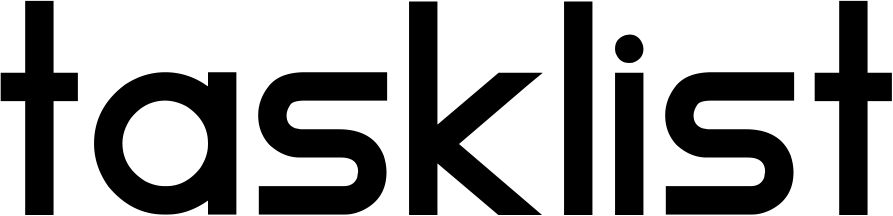
<style>
.page{position:relative;width:893px;height:216px;background:#ffffff}
.page>*{position:absolute;margin:0}
.t1{font:248.5px "StarAvenue";letter-spacing:0.04em;color:#000000}
</style>
<div class="page">
<p class="t1" style="left:0px;top:0px;width:892px;height:215px">tasklist</p>
</div>
